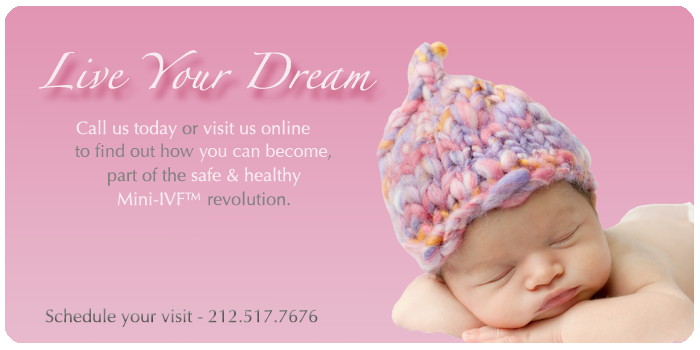
<style>
.page{position:relative;width:700px;height:350px}
.page>*{position:absolute;margin:0}
.t1{font:32px "Zapfino";color:#f6ecf0}
.t2{font:18px "Optima-Regular";color:#f6ecf0}
.t3{font:18px "Optima-Regular";color:#818181}
.t4{font:18px "Optima-Regular";color:#6d6d6d}
</style>
<div class="page">
<p class="t1" style="left:38px;top:50px;width:339px;height:41px">Live Your Dream</p>
<p class="t2" style="left:76px;top:120px;width:234px;height:19px">Call us today <span class="t3">or</span> visit us online</p>
<p class="t3" style="left:75px;top:143px;width:256px;height:19px">to find out how <span class="t2">you can become</span>,</p>
<p class="t2" style="left:108px;top:167px;width:193px;height:19px"><span class="t3">part of the </span>safe &amp; healthy</p>
<p class="t3" style="left:117px;top:191px;width:173px;height:15px"><span class="t2">Mini-IVF™</span> revolution.</p>
<p class="t4" style="left:45px;top:308px;width:273px;height:19px">Schedule your visit - 212.517.7676</p>
</div>
